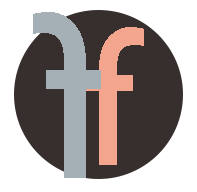
<style>
.page{position:relative;width:197px;height:192px;background:#362f2d}
.page>*{position:absolute;margin:0}
.t1{font:240px "GillSans";color:#a4b0b6}
.t2{font:200px "GillSans";color:#f4a58e}
</style>
<div class="page">
<p class="t1" style="left:33px;top:12px;width:68px;height:166px;rotate:180deg">f</p>
<p class="t2" style="left:86px;top:27px;width:58px;height:138px">f</p>
</div>
